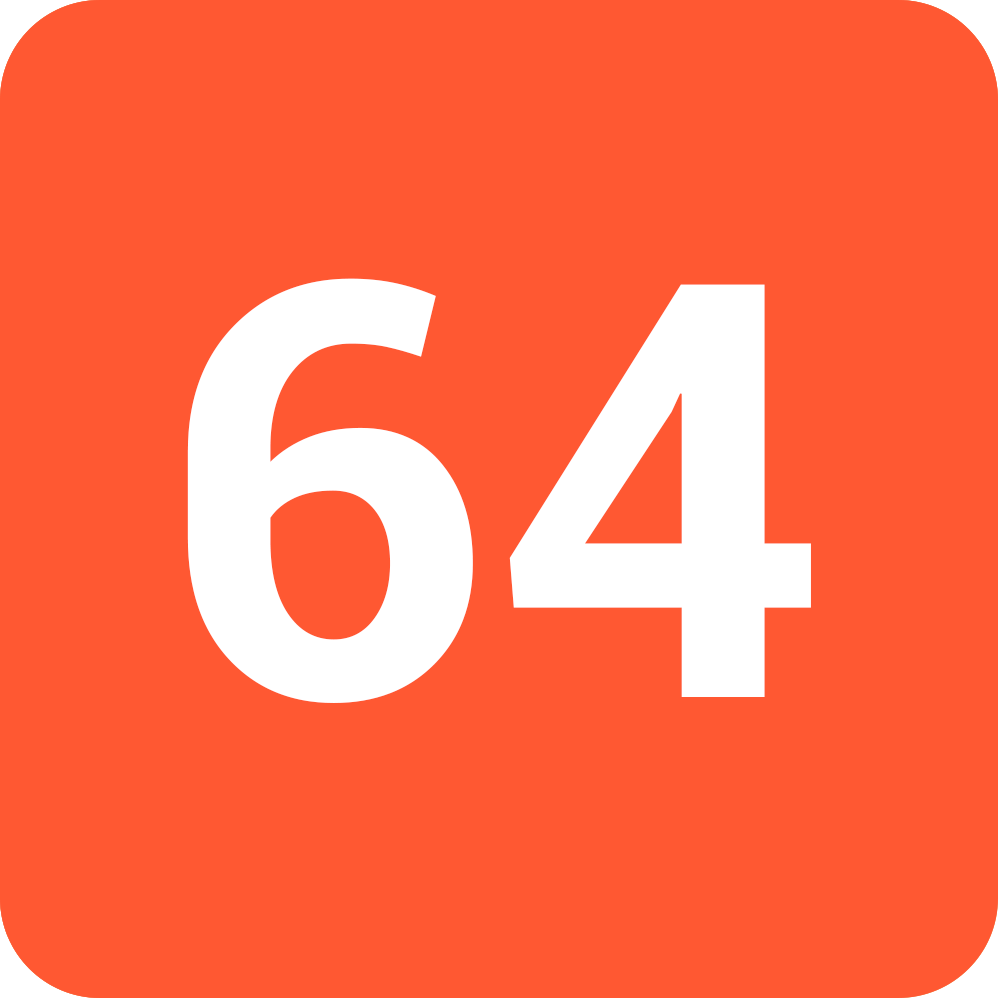
<style>
.page{position:relative;width:998px;height:998px;background:#ff5832}
.page>*{position:absolute;margin:0}
.t1{font:580px "Roboto-Bold";color:#ffffff}
</style>
<div class="page">
<p class="t1" style="left:187px;top:278px;width:624px;height:425px">64</p>
</div>
